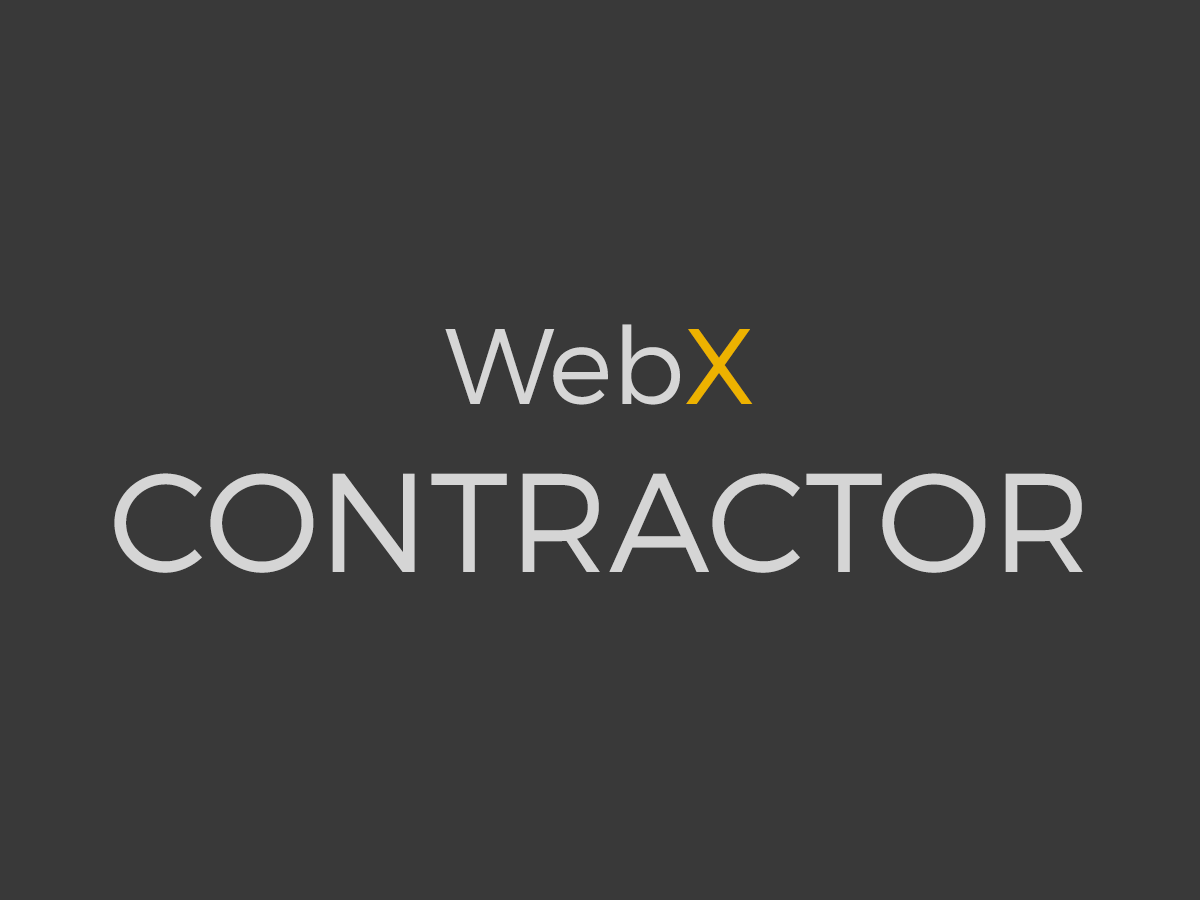
<style>
.page{position:relative;width:1200px;height:900px;background:#393939}
.page>*{position:absolute;margin:0}
.t1{font:140px "Montserrat-Light";color:#d5d5d5;text-transform:uppercase}
.t2{font:107px "Montserrat-Light";color:#d6d6d6}
.t3{font:107px "Montserrat-Light";color:#edb200}
</style>
<div class="page">
<p class="t1" style="left:114px;top:324px;width:969px;height:249px;text-align:center"><span class="t2">Web</span><span class="t3">X<br></span>Contractor</p>
</div>
